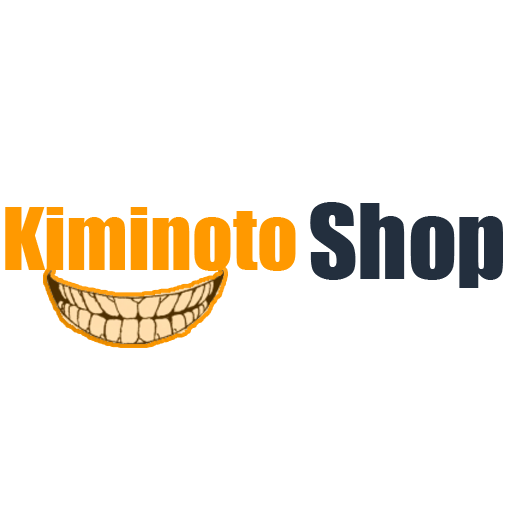
<style>
.page{position:relative;width:512px;height:512px;background:#ffffff}
.page>*{position:absolute;margin:0}
.t1{font:80px "Impact";color:#ff9900}
.t2{font:95.8px "Impact";color:#232f3e}
</style>
<div class="page">
<p class="t1" style="left:5px;top:207px;width:291px;height:64px">Kiminoto</p>
<p class="t2" style="left:310px;top:202px;width:193px;height:86px">Shop</p>
</div>
